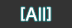
<style>
.page{position:relative;width:72px;height:28px;background:#333333}
.page>*{position:absolute;margin:0}
.t1{font:18px "FutoGoB101Pr5-Bold";color:#ffffff}
.t2{font:14.9px "FutoGoB101Pr5-Bold";color:#ffffff;scale:1.2 1}
</style>
<div class="page">
<p class="t1" style="left:21px;top:7px;width:30px;height:14px"><span class="t2">[</span>All<span class="t2">]</span></p>
</div>
